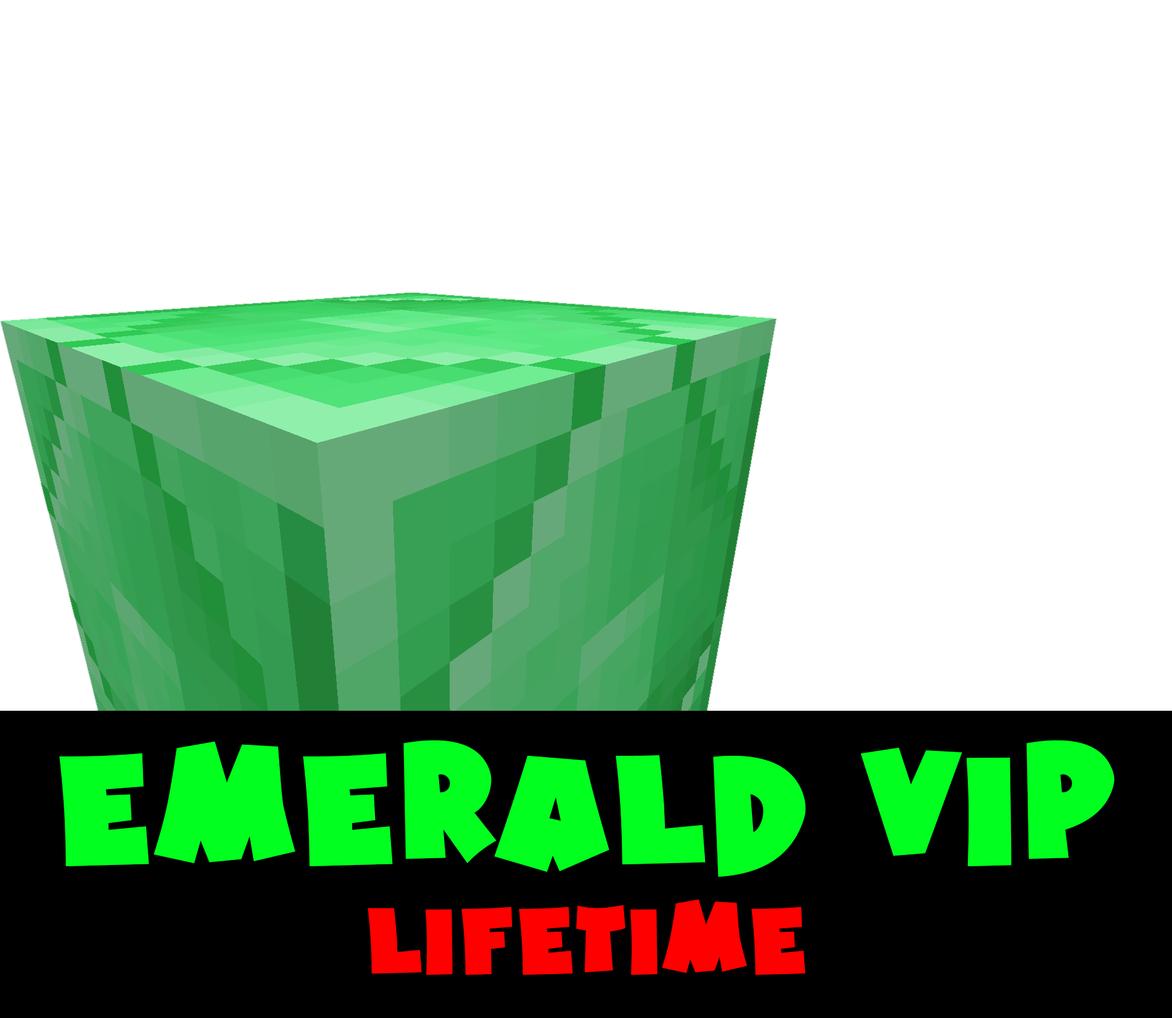
<style>
.page{position:relative;width:1172px;height:1018px;background:#ffffff}
.page>*{position:absolute;margin:0}
.t1{font:154.2px "HotMustardBTN";color:#01ff1f}
.t2{font:92.5px "HotMustardBTN";color:#ff0000}
</style>
<div class="page">
<p class="t1" style="left:59px;top:740px;width:1055px;height:136px">Emerald VIP</p>
<p class="t2" style="left:368px;top:899px;width:437px;height:75px">Lifetime</p>
</div>
